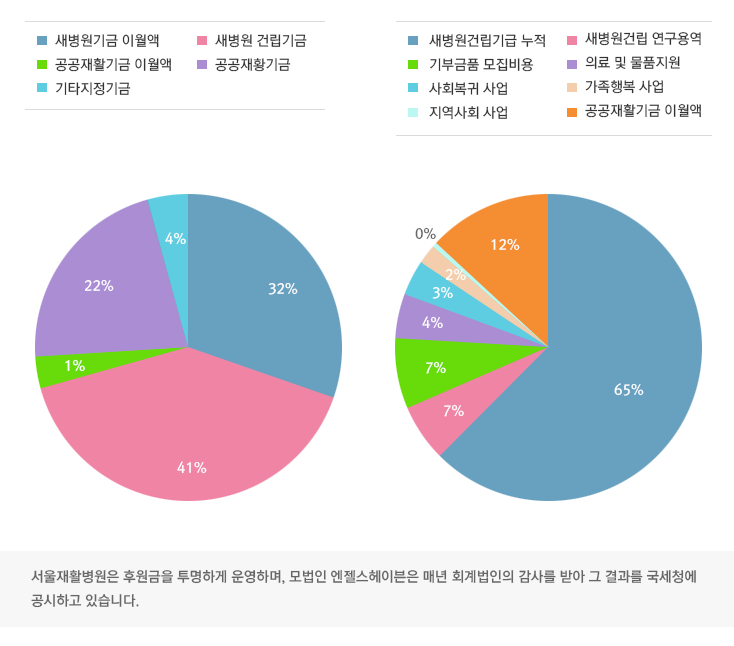
<style>
.page{position:relative;width:734px;height:646px;background:#ffffff}
.page>*{position:absolute;margin:0}
.t1{font:14px/24px "RixMGoM";color:#333333}
.t2{font:14px "RixMGoB";color:#ffffff}
.t3{font:14px "RixMGoB";color:#666666}
.t4{font:14px/24px "RixMGoB";color:#666666}
</style>
<div class="page">
<p class="t1" style="left:55px;top:34px;width:116px;height:62px">새병원기금 이월액<br>공공재활기금 이월액<br>기타지정기금</p>
<p class="t1" style="left:215px;top:34px;width:92px;height:38px">새병원 건립기금<br>공공재황기금</p>
<p class="t1" style="left:429px;top:34px;width:116px;height:86px">새병원건립기급 누적<br>기부금품 모집비용<br>사회복귀 사업<br>지역사회 사업</p>
<p class="t1" style="left:585px;top:32px;width:116px;height:86px">새병원건립 연구용역<br>의료 및 물품지원<br>가족행복 사업<br>공공재활기금 이월액</p>
<p class="t2" style="left:165px;top:232px;width:21px;height:13px">4%</p>
<p class="t3" style="left:415px;top:227px;width:21px;height:13px">0%</p>
<p class="t2" style="left:491px;top:239px;width:29px;height:12px">12%</p>
<p class="t2" style="left:446px;top:268px;width:20px;height:12px">2%</p>
<p class="t2" style="left:85px;top:279px;width:29px;height:13px">22%</p>
<p class="t2" style="left:268px;top:283px;width:30px;height:12px">32%</p>
<p class="t2" style="left:432px;top:286px;width:21px;height:13px">3%</p>
<p class="t2" style="left:422px;top:316px;width:21px;height:13px">4%</p>
<p class="t2" style="left:65px;top:359px;width:20px;height:12px">1%</p>
<p class="t2" style="left:426px;top:361px;width:20px;height:13px">7%</p>
<p class="t2" style="left:614px;top:383px;width:30px;height:13px">65%</p>
<p class="t2" style="left:444px;top:404px;width:20px;height:13px">7%</p>
<p class="t2" style="left:177px;top:461px;width:30px;height:13px">41%</p>
<p class="t4" style="left:31px;top:569px;width:665px;height:39px">서울재활병원은 후원금을 투명하게 운영하며, 모법인 엔젤스헤이븐은 매년 회계법인의 감사를 받아 그 결과를 국세청에 <br>공시하고 있습니다.</p>
</div>
